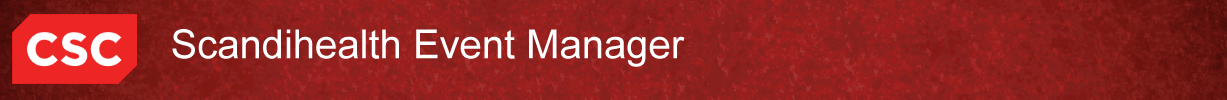
<style>
.page{position:relative;width:1227px;height:100px}
.page>*{position:absolute;margin:0}
.t1{font:40px "ArialMT";color:#ffffff}
</style>
<div class="page">
<p class="t1" style="left:172px;top:29px;width:513px;height:38px">Scandihealth Event Manager</p>
</div>
